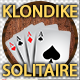
<style>
.page{position:relative;width:80px;height:80px}
.page>*{position:absolute;margin:0}
.t1{font:17px "MyriadPro-Regular";color:#ffd862;text-transform:uppercase;font-weight:bold}
</style>
<div class="page">
<p class="t1" style="left:3px;top:5px;width:75px;height:13px">klondike</p>
<p class="t1" style="left:2px;top:64px;width:76px;height:13px">Solitaire</p>
</div>
